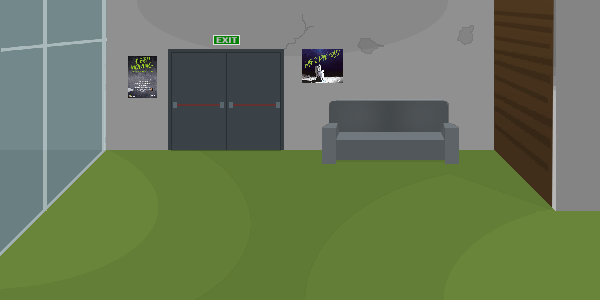
<style>
.page{position:relative;width:600px;height:300px}
.page>*{position:absolute;margin:0}
.t1{font:8.3px "BebasNeue-Regular";color:#c0bfbf;scale:1.94 1}
</style>
<div class="page">
<p class="t1" style="left:216px;top:37px;width:21px;height:6px">EXIT</p>
</div>
